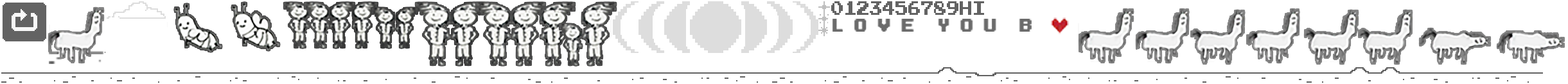
<style>
.page{position:relative;width:1568px;height:84px;background:#ffffff}
.page>*{position:absolute;margin:0}
.t1{font:14.7px "PressStart2P-Regular";letter-spacing:-0.04em;color:#6a6a6a;scale:0.83 1}
</style>
<div class="page">
<p class="t1" style="left:832px;top:19px;width:200px;height:12px">L O V E  Y O U  B</p>
<p class="t1" style="left:832px;top:19px;width:200px;height:12px">L O V E  Y O U  B</p>
<p class="t1" style="left:832px;top:19px;width:200px;height:12px">L O V E  Y O U  B</p>
</div>
